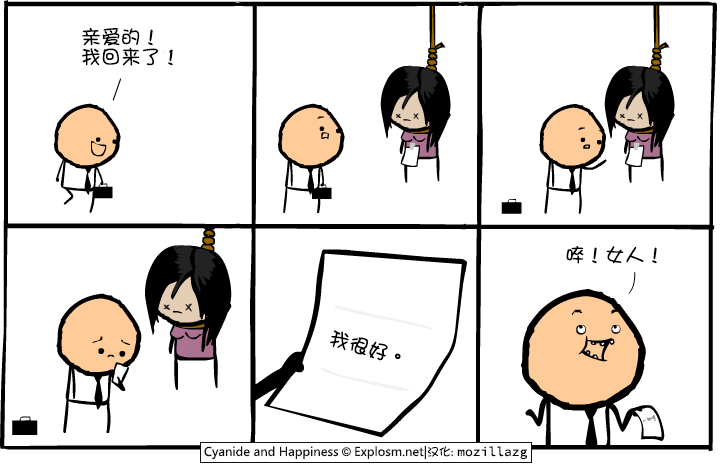
<style>
.page{position:relative;width:720px;height:465px;background:#ffffff}
.page>*{position:absolute;margin:0}
.t1{font:20px/20px "DFGirl";color:#000000}
.t2{font:20px "DFGirl";color:#000000}
.t3{font:20.3px "DFGirl";color:#000000}
</style>
<div class="page">
<p class="t1" style="left:81px;top:27px;width:92px;height:39px">亲爱的！<br>我回来了！</p>
<p class="t2" style="left:566px;top:246px;width:91px;height:18px">啐！女人！</p>
<p class="t3" style="left:330px;top:330px;width:71px;height:31px;rotate:16deg">我很好。</p>
</div>
